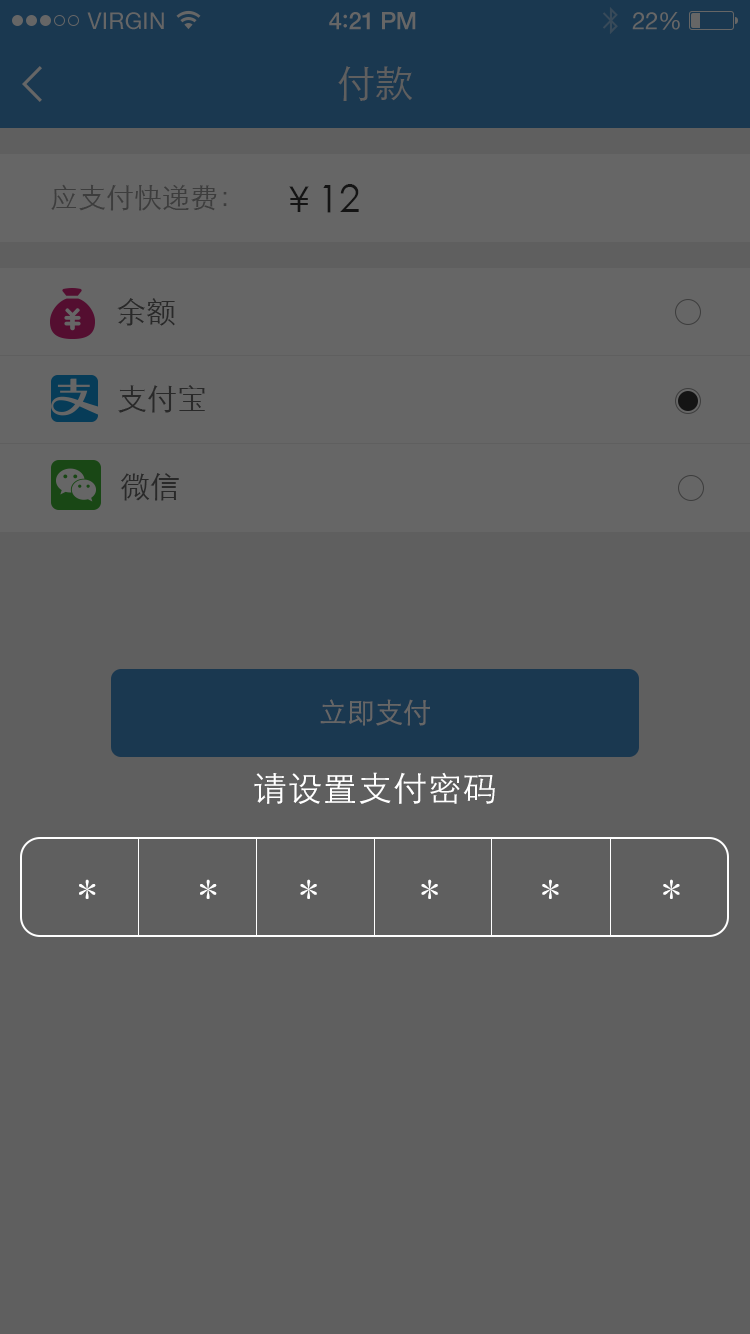
<style>
.page{position:relative;width:750px;height:1334px;background:#5f5f5f}
.page>*{position:absolute;margin:0}
.t1{font:23px "HelveticaNeue";letter-spacing:0.02em;color:#666666}
.t2{font:24px "HelveticaNeue-Medium";letter-spacing:-0.02em;color:#666666}
.t3{font:26px "Avenir-Medium";letter-spacing:-0.02em;color:#666666}
.t4{font:24px "HelveticaNeue";letter-spacing:-0.02em;color:#666666}
.t5{font:38px "STXihei";color:#5f5f5f}
.t6{font:28px "STXihei";color:#3d3d3d}
.t7{font:38px "STXihei";color:#141414}
.t8{font:30px "STXihei";color:#292929}
.t9{font:28px "STXihei";color:#666666}
.t10{font:34px "STXihei";letter-spacing:0.03em;color:#ffffff}
.t11{font:38px "SimSun";letter-spacing:0.03em;color:#ffffff}
</style>
<div class="page">
<p class="t1" style="left:87px;top:12px;width:77px;height:18px">VIRGIN</p>
<p class="t2" style="left:329px;top:12px;width:87px;height:18px">4<span class="t3">:</span>21 PM</p>
<p class="t4" style="left:632px;top:12px;width:48px;height:18px">22%</p>
<p class="t5" style="left:338px;top:66px;width:74px;height:35px">付款</p>
<p class="t6" style="left:51px;top:184px;width:176px;height:27px">应支付快递费：</p>
<p class="t7" style="left:289px;top:184px;width:70px;height:29px">￥12</p>
<p class="t8" style="left:117px;top:298px;width:58px;height:28px">余额</p>
<p class="t8" style="left:118px;top:385px;width:87px;height:28px">支付宝</p>
<p class="t8" style="left:120px;top:473px;width:59px;height:28px">微信</p>
<p class="t9" style="left:320px;top:699px;width:110px;height:27px">立即支付</p>
<p class="t10" style="left:254px;top:772px;width:241px;height:32px">请设置支付密码</p>
<p class="t11" style="left:79px;top:879px;width:601px;height:20px">*     *    *     *     *     *</p>
</div>
